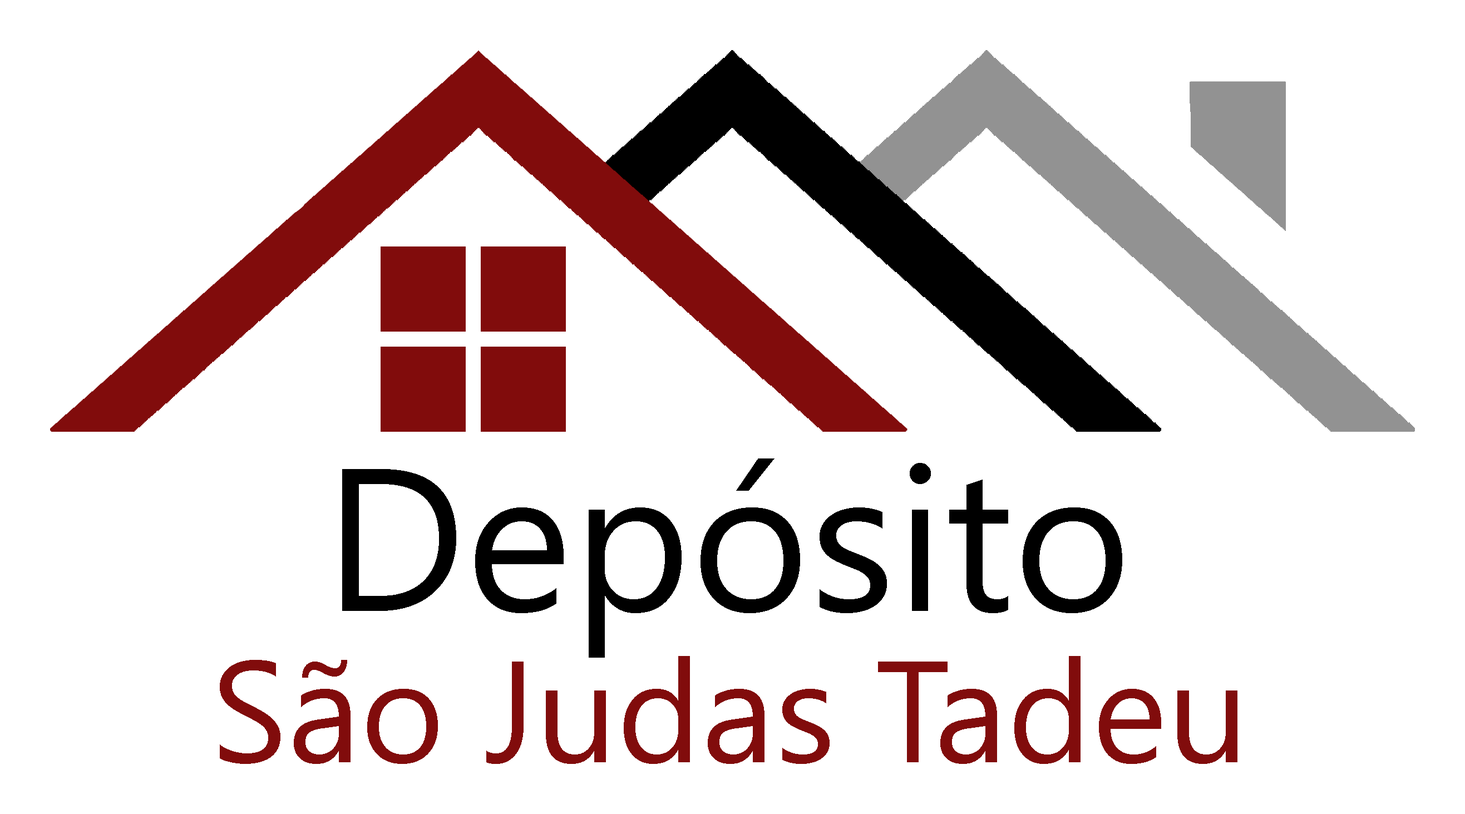
<style>
.page{position:relative;width:1465px;height:814px;background:#ffffff}
.page>*{position:absolute;margin:0}
.t1{font:202.6px "SegoeUI";color:#000000}
.t2{font:143.7px "SegoeUI";color:#810c0c}
</style>
<div class="page">
<p class="t1" style="left:342px;top:458px;width:780px;height:200px">Depósito</p>
<p class="t2" style="left:220px;top:656px;width:1017px;height:108px">São Judas Tadeu</p>
</div>
